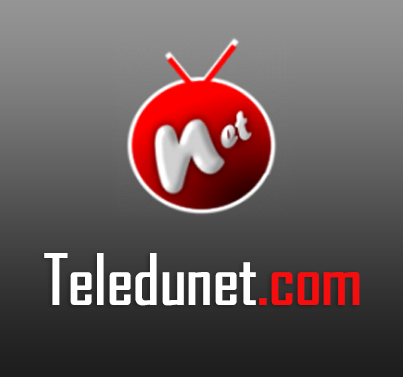
<style>
.page{position:relative;width:403px;height:377px}
.page>*{position:absolute;margin:0}
.t1{font:66.7px "AgencyFB-Reg";letter-spacing:-0.025em;color:#ffffff;font-weight:bold;scale:1.05 1}
.t2{font:66.7px "AgencyFB-Reg";letter-spacing:-0.025em;color:#f70d0d;font-weight:bold;scale:1.05 1}
</style>
<div class="page">
<p class="t1" style="left:44px;top:253px;width:316px;height:53px">Teledunet<span class="t2">.com</span></p>
</div>
